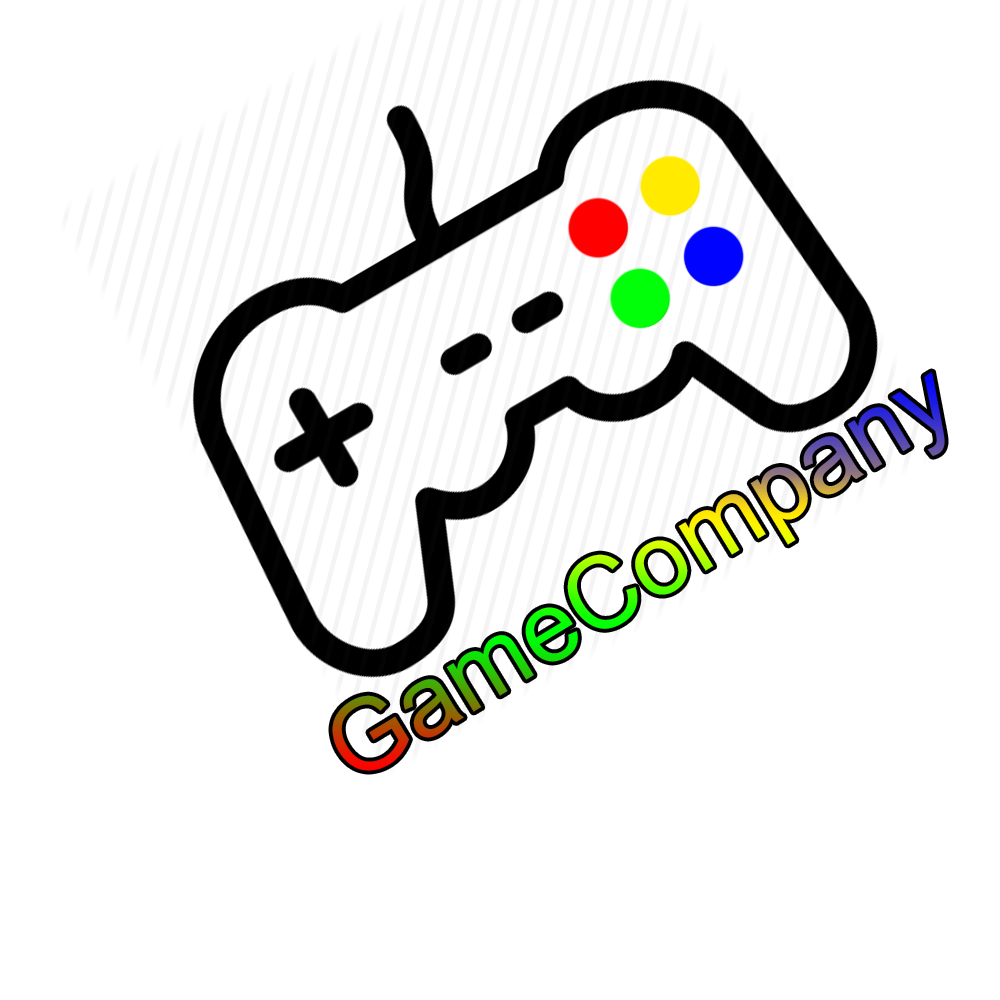
<style>
.page{position:relative;width:1000px;height:1000px;background:#ffffff}
.page>*{position:absolute;margin:0}
.t1{font:100px "ArialMT";letter-spacing:0.01em}
</style>
<div class="page">
<p class="t1" style="left:332px;top:372px;width:613px;height:399px;rotate:-31deg">GameCompany</p>
</div>
